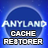
<style>
.page{position:relative;width:48px;height:48px}
.page>*{position:absolute;margin:0}
.t1{font:7px "Arial-BoldMT";color:#ffffff}
</style>
<div class="page">
<p class="t1" style="left:4px;top:31px;width:39px;height:13px;text-align:center">CACHE<br>RESTORER</p>
</div>
